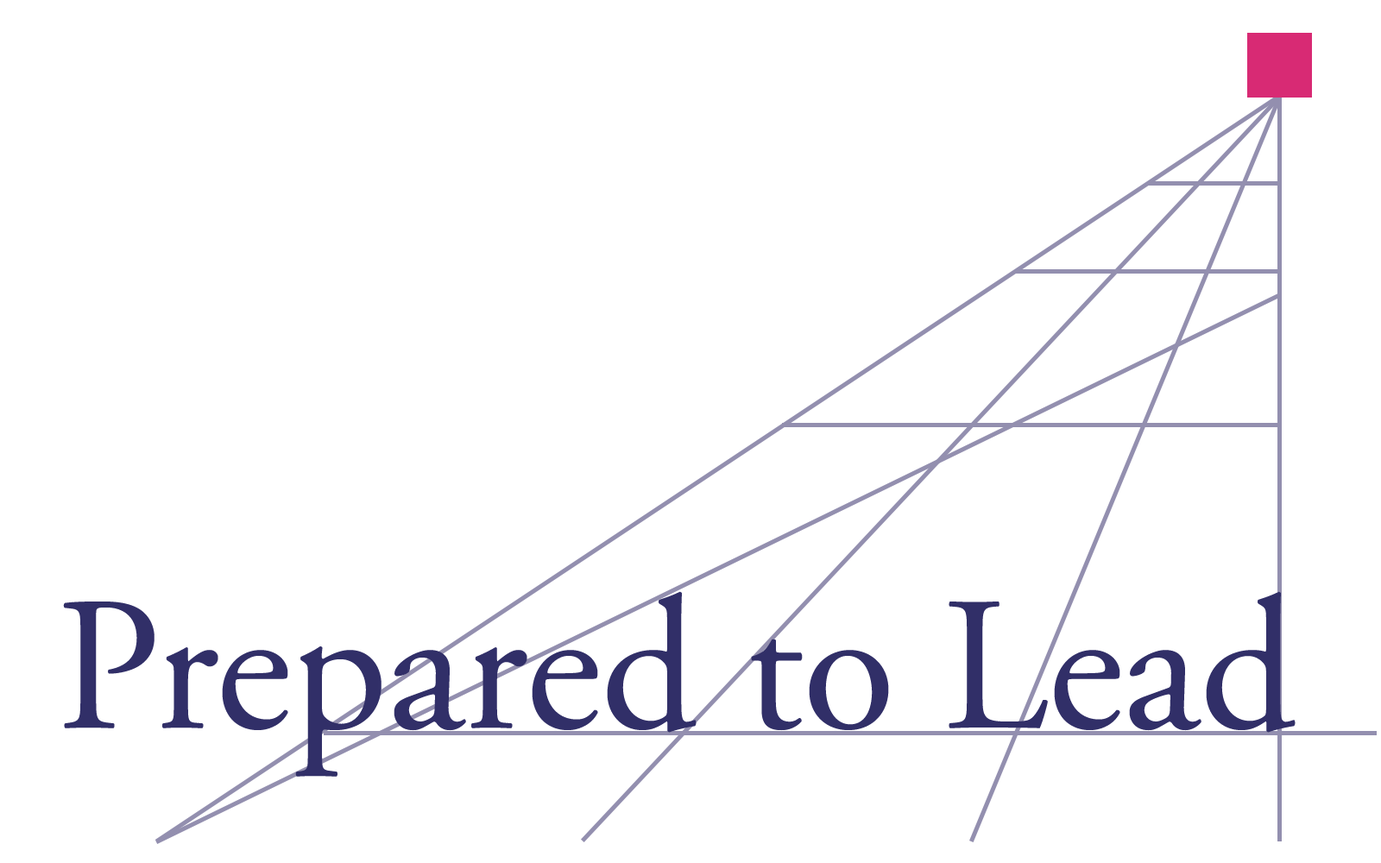
<style>
.page{position:relative;width:1381px;height:863px;background:#ffffff}
.page>*{position:absolute;margin:0}
.t1{font:189.9px "AGaramondPro-Regular";color:#312f68}
</style>
<div class="page">
<p class="t1" style="left:63px;top:591px;width:1233px;height:186px">Prepared to Lead</p>
</div>
